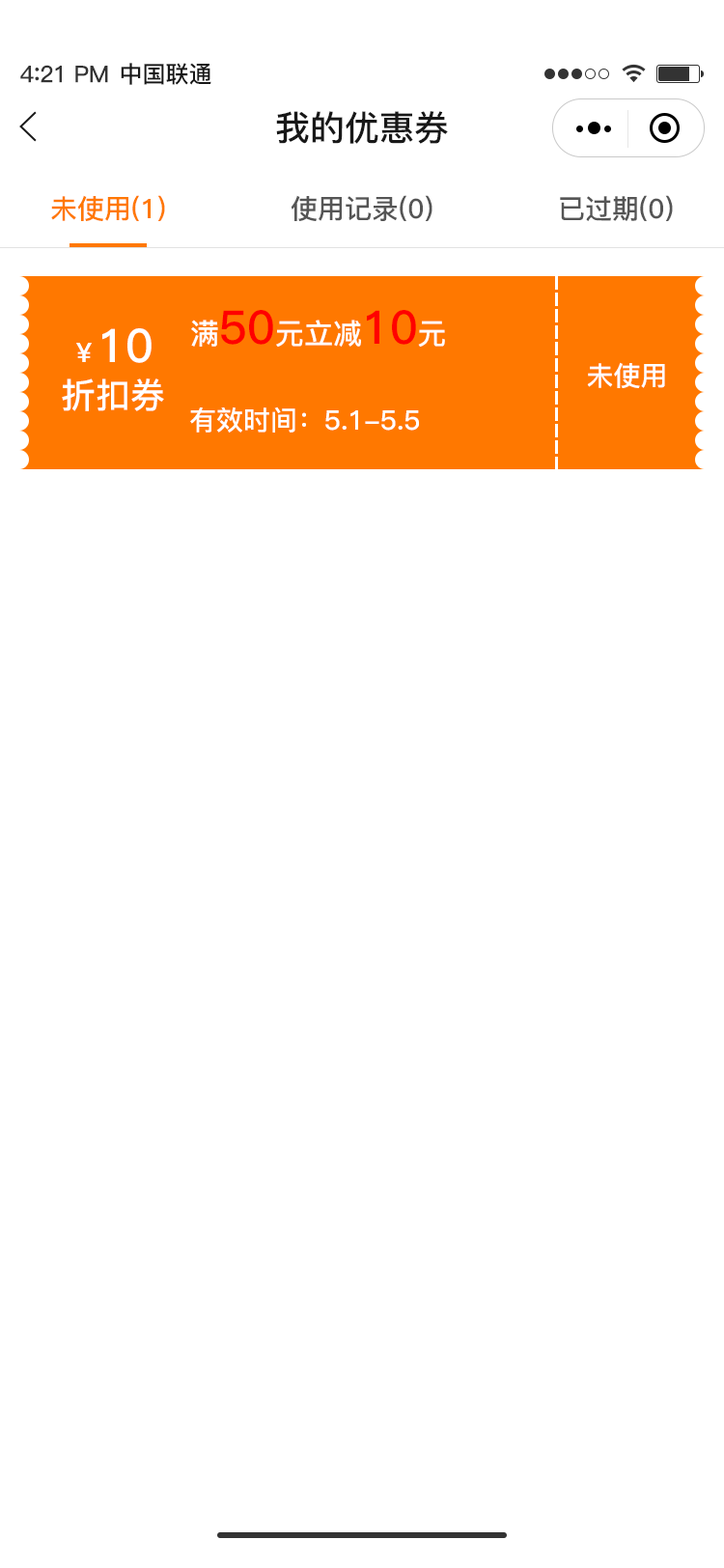
<style>
.page{position:relative;width:724px;height:1568px;background:#ffffff}
.page>*{position:absolute;margin:0}
.t1{font:23.2px "PingFang-SC-Bold";letter-spacing:-0.02em;color:#333333}
.t2{font:25.1px "PingFang-SC-Bold";letter-spacing:-0.02em;color:#333333}
.t3{font:23.2px "PingFang-SC-Bold";color:#181818}
.t4{font:34.8px "PingFang-SC-Bold";color:#181818}
.t5{font:27px "PingFang-SC-Bold";color:#ff7800}
.t6{font:27px "PingFang-SC-Bold";color:#555555}
.t7{font:29px "PingFang-SC-Bold";color:#ffffff}
.t8{font:46.3px "PingFang-SC-Bold";color:#ff0000}
.t9{font:46.3px "PingFang-SC-Bold";color:#ffffff}
.t10{font:27px "PingFang-SC-Bold";color:#ffffff}
.t11{font:34.8px "PingFang-SC-Bold";color:#ffffff}
</style>
<div class="page">
<p class="t1" style="left:20px;top:65px;width:88px;height:18px">4<span class="t2">:</span>21 PM</p>
<p class="t3" style="left:121px;top:63px;width:90px;height:22px">中国联通</p>
<p class="t4" style="left:276px;top:111px;width:172px;height:33px">我的优惠券</p>
<p class="t5" style="left:51px;top:195px;width:114px;height:26px">未使用(1)</p>
<p class="t6" style="left:291px;top:195px;width:142px;height:26px">使用记录(0)</p>
<p class="t6" style="left:560px;top:195px;width:113px;height:26px">已过期(0)</p>
<p class="t7" style="left:191px;top:310px;width:254px;height:37px">满<span class="t8">50</span>元立减<span class="t8">10</span>元</p>
<p class="t9" style="left:76px;top:328px;width:76px;height:35px"><span class="t10">￥</span>10</p>
<p class="t10" style="left:587px;top:362px;width:78px;height:26px">未使用</p>
<p class="t11" style="left:62px;top:378px;width:102px;height:33px">折扣券</p>
<p class="t10" style="left:190px;top:406px;width:229px;height:27px">有效时间：5.1-5.5</p>
</div>
